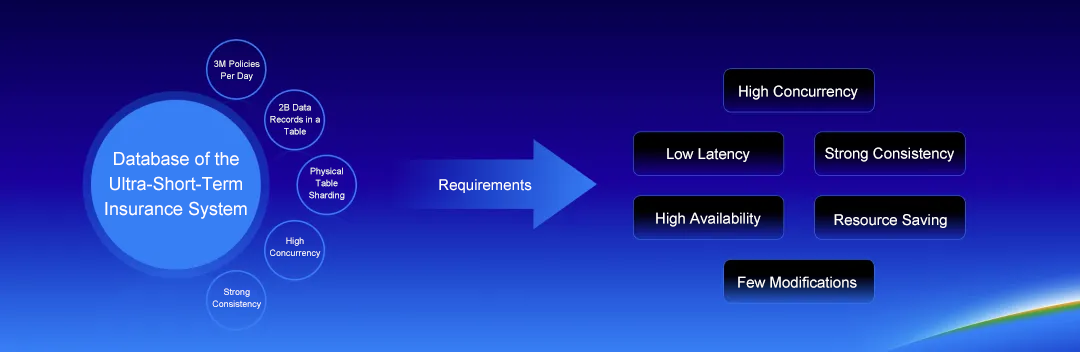
<style>
.page{position:relative;width:1080px;height:352px}
.page>*{position:absolute;margin:0}
.t1{font:9px/12px "ArialMT";color:#ffffff}
.t2{font:15px "ArialMT";color:#ffffff}
.t3{font:18px/25px "ArialMT";color:#ffffff}
</style>
<div class="page">
<p class="t1" style="left:214px;top:60px;width:46px;height:21px;text-align:center">3M Policies Per Day</p>
<p class="t2" style="left:739px;top:85px;width:119px;height:15px">High Concurrency</p>
<p class="t1" style="left:270px;top:104px;width:50px;height:31px;text-align:center">2B Data Records in a Table</p>
<p class="t2" style="left:667px;top:148px;width:83px;height:14px">Low Latency</p>
<p class="t2" style="left:825px;top:147px;width:129px;height:15px">Strong Consistency</p>
<p class="t3" style="left:105px;top:151px;width:142px;height:68px;text-align:center">Database of the Ultra-Short-Term Insurance System</p>
<p class="t1" style="left:309px;top:167px;width:36px;height:33px;text-align:center">Physical Table Sharding</p>
<p class="t2" style="left:439px;top:179px;width:93px;height:14px">Requirements</p>
<p class="t2" style="left:656px;top:212px;width:105px;height:15px">High Availability</p>
<p class="t2" style="left:834px;top:214px;width:113px;height:14px">Resource Saving</p>
<p class="t1" style="left:270px;top:237px;width:51px;height:21px;text-align:center">High Concurrency</p>
<p class="t2" style="left:738px;top:276px;width:119px;height:12px">Few Modifications</p>
<p class="t1" style="left:212px;top:288px;width:49px;height:21px;text-align:center">Strong Consistency</p>
</div>
